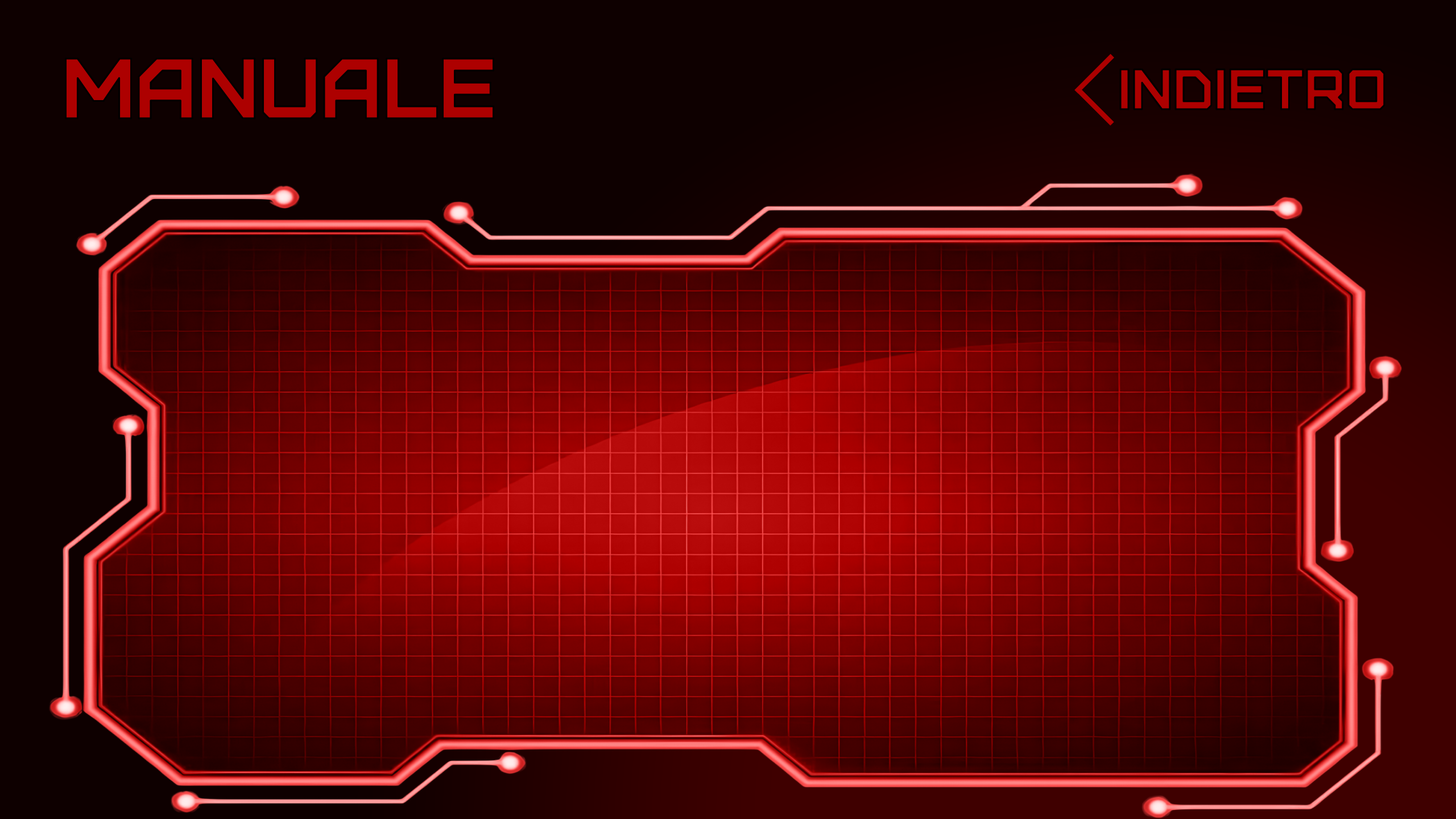
<style>
.page{position:relative;width:1456px;height:819px}
.page>*{position:absolute;margin:0}
.t1{font:85.3px "Furore";color:#ad0000}
.t2{font:56.9px "Furore";color:#ad0000}
</style>
<div class="page">
<p class="t1" style="left:64px;top:57px;width:431px;height:62px">MANUALE</p>
<p class="t2" style="left:1119px;top:68px;width:266px;height:42px">INDIETRO</p>
</div>
